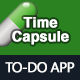
<style>
.page{position:relative;width:80px;height:80px;background:#2a8221}
.page>*{position:absolute;margin:0}
.t1{font:14px/14px "Helvetica-Bold";color:#ffffff;font-weight:bold}
.t2{font:14px "KhmerUI";letter-spacing:-0.05em;color:#ffffff;font-weight:bold}
</style>
<div class="page">
<p class="t1" style="left:12px;top:17px;width:57px;height:28px;text-align:center">Time<br>Capsule</p>
<p class="t2" style="left:5px;top:62px;width:70px;height:11px">TO-DO APP</p>
</div>
